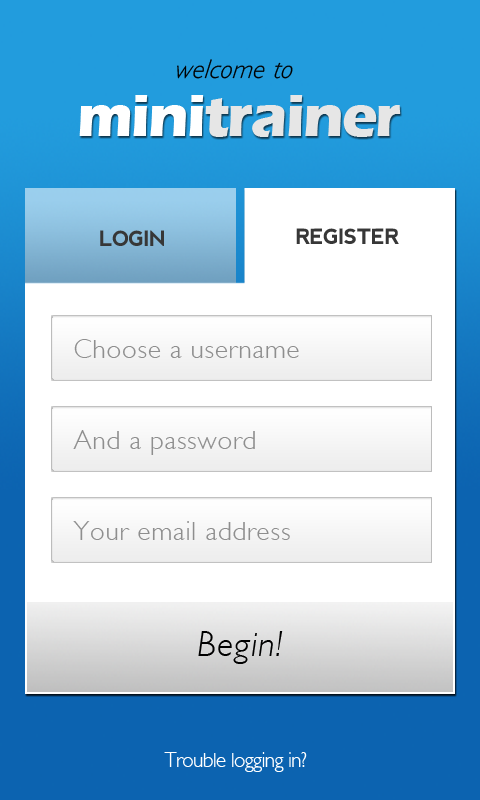
<style>
.page{position:relative;width:480px;height:800px;background:#ffffff}
.page>*{position:absolute;margin:0}
.t1{font:27px "GillSans-LightItalic";letter-spacing:0.01em;color:#000000;font-style:italic}
.t2{font:60px "ErasITC-Bold";letter-spacing:-0.03em;color:#e6e6e6}
.t3{font:60px "ErasITC-Bold";letter-spacing:-0.03em;color:#ffffff}
.t4{font:21px "nevis-Bold";letter-spacing:-0.03em;color:#373737}
.t5{font:27px "GillSans-Light";letter-spacing:0.03em;color:#8e8e8e}
.t6{font:36px "GillSans-LightItalic";letter-spacing:0.03em;color:#000000}
.t7{font:21px "GillSans-Light";letter-spacing:-0.03em;color:#ffffff}
</style>
<div class="page">
<p class="t1" style="left:177px;top:59px;width:116px;height:20px">welcome to</p>
<p class="t2" style="left:79px;top:95px;width:322px;height:42px"><span class="t3">mini</span>trainer</p>
<p class="t4" style="left:100px;top:230px;width:64px;height:16px">LOGIN</p>
<p class="t4" style="left:296px;top:228px;width:103px;height:16px">REGISTER</p>
<p class="t5" style="left:74px;top:339px;width:225px;height:19px">Choose a username</p>
<p class="t5" style="left:73px;top:430px;width:182px;height:25px">And a password</p>
<p class="t5" style="left:73px;top:521px;width:217px;height:19px">Your email address</p>
<p class="t6" style="left:198px;top:631px;width:85px;height:33px">Begin!</p>
<p class="t7" style="left:164px;top:752px;width:143px;height:20px">Trouble logging in?</p>
</div>
